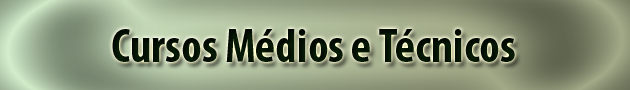
<style>
.page{position:relative;width:630px;height:90px}
.page>*{position:absolute;margin:0}
.t1{font:48px "MyriadPro-BoldCond";color:#081d08}
</style>
<div class="page">
<p class="t1" style="left:112px;top:29px;width:403px;height:33px">Cursos Médios e Técnicos</p>
</div>
